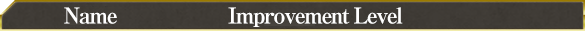
<style>
.page{position:relative;width:585px;height:31px}
.page>*{position:absolute;margin:0}
.t1{font:22px "RyuminPro-ExBold";letter-spacing:-0.08em;color:#ffffff}
</style>
<div class="page">
<p class="t1" style="left:64px;top:7px;width:53px;height:17px">Name</p>
<p class="t1" style="left:228px;top:7px;width:175px;height:20px">Improvement Level</p>
</div>
